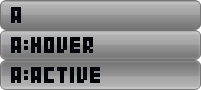
<style>
.page{position:relative;width:201px;height:90px}
.page>*{position:absolute;margin:0}
.t1{font:24px "04b24";color:#02050a;font-weight:bold}
</style>
<div class="page">
<p class="t1" style="left:11px;top:7px;width:10px;height:16px">A</p>
<p class="t1" style="left:11px;top:37px;width:82px;height:16px">A:HOVER</p>
<p class="t1" style="left:11px;top:67px;width:89px;height:16px">A:ACTIVE</p>
</div>
